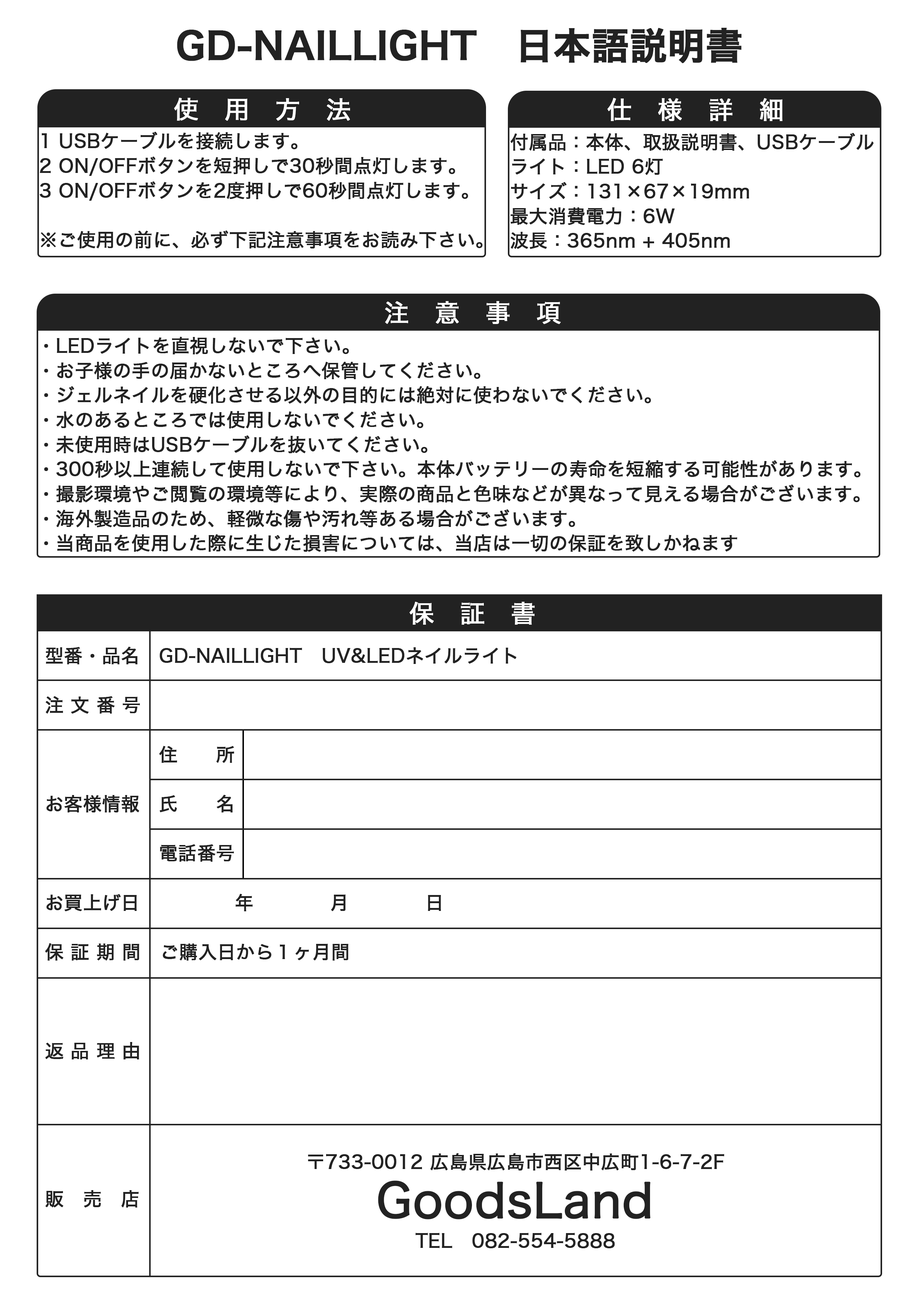
<style>
.page{position:relative;width:918px;height:1299px;background:#ffffff}
.page>*{position:absolute;margin:0}
.t1{font:37px "HiraginoKaku-W6-90msp-RKSJ-H";color:#222222;font-weight:bold}
.t2{font:24.7px "HiraginoKaku-W4-90msp-RKSJ-H";color:#ffffff;font-weight:bold}
.t3{font:18.5px/24.7px "HiraginoKaku-W4-90msp-RKSJ-H";color:#222222;font-weight:bold}
.t4{font:4.4px/24.7px "HiraginoKaku-W4-90msp-RKSJ-H";color:#222222;font-weight:bold}
.t5{font:46.3px/29.3px "HiraginoKaku-W4-90msp-RKSJ-H";color:#222222;font-weight:bold}
</style>
<div class="page">
<p class="t1" style="left:177px;top:28px;width:565px;height:35px">GD-NAILLIGHT　日本語説明書</p>
<p class="t2" style="left:174px;top:98px;width:176px;height:23px">使　用　方　法</p>
<p class="t2" style="left:608px;top:98px;width:175px;height:23px">仕　様　詳　細</p>
<p class="t3" style="left:40px;top:132px;width:443px;height:116px">1 USBケーブルを接続します。<br>2 ON/OFFボタンを短押しで30秒間点灯します。<br>3 ON/OFFボタンを2度押しで60秒間点灯します。<br><br>※ご使用の前に、必ず下記注意事項をお読み下さい。</p>
<p class="t3" style="left:511px;top:133px;width:363px;height:116px">付属品：本体、取扱説明書、USBケーブル<br>ライト：LED 6灯<br>サイズ：131×67×19mm<br>最大消費電力：6W<br>波長：365nm + 405nm</p>
<p class="t2" style="left:385px;top:301px;width:176px;height:23px">注　意　事　項</p>
<p class="t3" style="left:44px;top:337px;width:817px;height:215px">・LEDライトを直視しないで下さい。<br>・お子様の手の届かないところへ保管してください。<br>・ジェルネイルを硬化させる以外の目的には絶対に使わないでください。<br>・水のあるところでは使用しないでください。<br>・未使用時はUSBケーブルを抜いてください。<br>・300秒以上連続して使用しないで下さい。本体バッテリーの寿命を短縮する可能性があります。<br>・撮影環境やご閲覧の環境等により、実際の商品と色味などが異なって見える場合がございます。<br>・海外製造品のため、軽微な傷や汚れ等ある場合がございます。<br>・当商品を使用した際に生じた損害については、当店は一切の保証を致しかねます</p>
<p class="t2" style="left:409px;top:602px;width:126px;height:23px">保　証　書</p>
<p class="t4" style="left:45px;top:646px;width:471px;height:561px">型番・品名　GD-NAILLIGHT　UV&amp;LEDネイルライト<br><br>注 文 番 号　<br><br>　　　　　　住　　所<br><br>お客様情報　氏　　名<br><br>　　　　　　電話番号 <br><br>お買上げ日　　　　　年　　　　月　　　　日<br><br>保 証 期 間　ご購入日から１ヶ月間<br><br><br><br>返 品 理 由<br><br><br><br><br><br>販　売　店</p>
<p class="t4" style="left:308px;top:1153px;width:417px;height:95px;text-align:center">〒733-0012 広島県広島市西区中広町1-6-7-2F<br><span class="t5">GoodsLand<br></span><br>TEL　082-554-5888</p>
</div>
